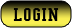
<style>
.page{position:relative;width:72px;height:28px}
.page>*{position:absolute;margin:0}
.t1{font:28px "CollegeSemiCondensed";letter-spacing:0.025em;color:#000000;font-variant:small-caps}
</style>
<div class="page">
<p class="t1" style="left:13px;top:8px;width:46px;height:13px">login</p>
</div>
